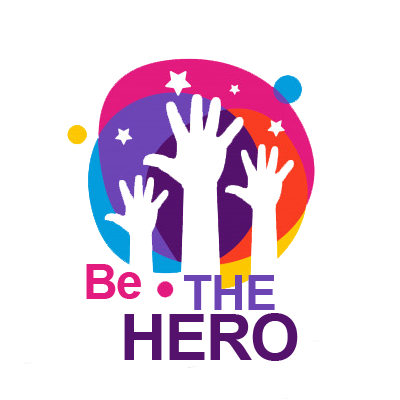
<style>
.page{position:relative;width:400px;height:400px;background:#ffffff}
.page>*{position:absolute;margin:0}
.t1{font:48px "Arial-BoldMT";letter-spacing:-0.025em;color:#e31b7e}
.t2{font:48px "Arial-BoldMT";letter-spacing:-0.025em;color:#6c44b4}
.t3{font:64px "Arial-BoldMT";letter-spacing:-0.025em;color:#54126c}
</style>
<div class="page">
<p class="t1" style="left:86px;top:264px;width:55px;height:35px">Be</p>
<p class="t2" style="left:184px;top:275px;width:91px;height:35px">THE</p>
<p class="t3" style="left:124px;top:313px;width:174px;height:48px">HERO</p>
</div>
